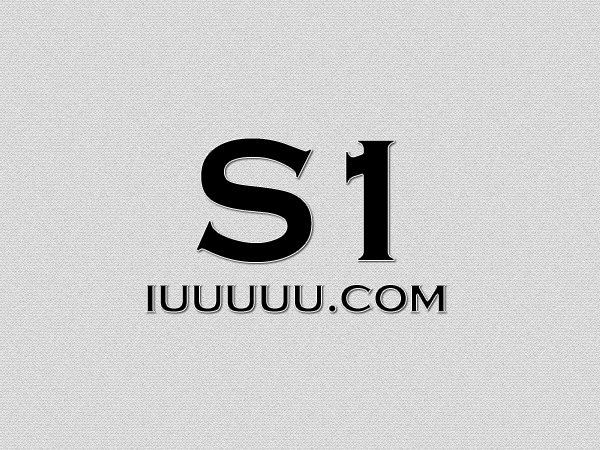
<style>
.page{position:relative;width:600px;height:450px}
.page>*{position:absolute;margin:0}
.t1{font:173.4px "ACopperGothCpsExp";letter-spacing:-0.025em;color:#000000}
.t2{font:48px "ACopperGothCpsExp";letter-spacing:-0.025em;color:#000000}
</style>
<div class="page">
<p class="t1" style="left:195px;top:137px;width:200px;height:126px">S1</p>
<p class="t2" style="left:145px;top:284px;width:301px;height:29px">iuuuuu.com</p>
</div>
